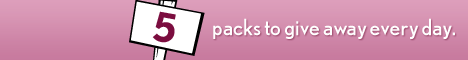
<style>
.page{position:relative;width:468px;height:60px}
.page>*{position:absolute;margin:0}
.t1{font:40px "NobelBold";letter-spacing:-0.005em;color:#7b0d3f}
.t2{font:22px "NobelRegular";color:#ffffff}
</style>
<div class="page">
<p class="t1" style="left:152px;top:11px;width:24px;height:32px;rotate:10deg">5</p>
<p class="t2" style="left:213px;top:18px;width:242px;height:21px">packs to give away every day.</p>
</div>
